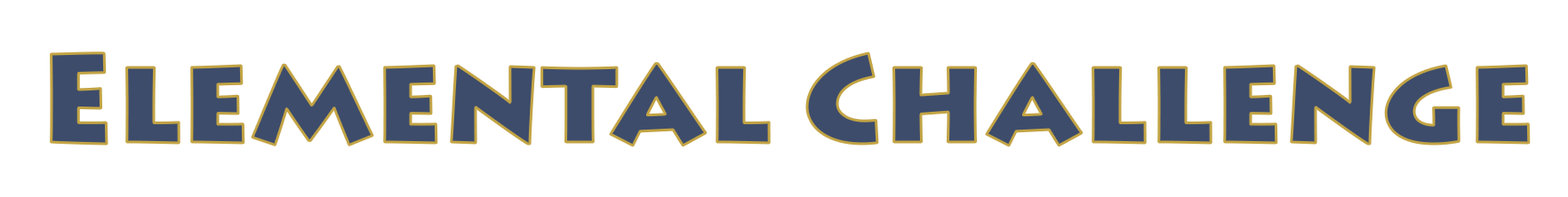
<style>
.page{position:relative;width:1568px;height:197px;background:#ffffff}
.page>*{position:absolute;margin:0}
.t1{font:123.6px "LithosPro-Black";color:#3d4c6b}
</style>
<div class="page">
<p class="t1" style="left:51px;top:52px;width:1478px;height:94px">Elemental Challenge</p>
</div>
